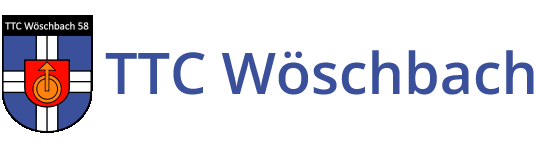
<style>
.page{position:relative;width:536px;height:150px;background:#ffffff}
.page>*{position:absolute;margin:0}
.t1{font:57.5px "OpenSans-Semibold";color:#3a509b}
</style>
<div class="page">
<p class="t1" style="left:105px;top:50px;width:429px;height:45px">TTC Wöschbach</p>
</div>
